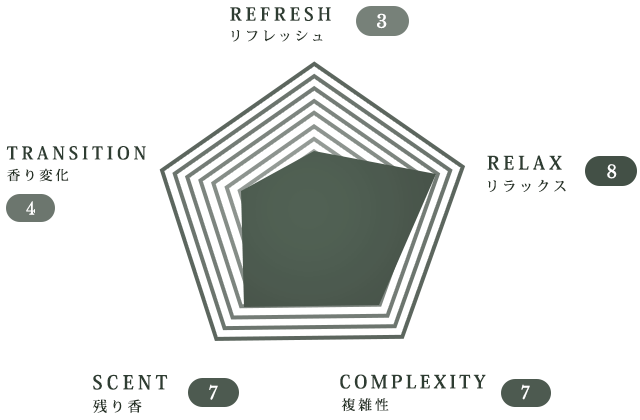
<style>
.page{position:relative;width:640px;height:420px;background:#ffffff}
.page>*{position:absolute;margin:0}
.t1{font:17.9px "KozMinPr6N-Bold";letter-spacing:0.22em;color:#27452e}
.t2{font:17.9px "LibreBaskerville-Regular";letter-spacing:0.06em;color:#ffffff}
.t3{font:13.4px "KozMinPr6N-Medium";letter-spacing:0.22em;color:#253125}
.t4{font:17.5px "KozMinPr6N-Bold";letter-spacing:0.22em;color:#27452e}
.t5{font:18.4px "KozMinPr6N-Bold";letter-spacing:0.22em;color:#27452e}
.t6{font:13.1px "KozMinPr6N-Medium";letter-spacing:0.22em;color:#20381f}
.t7{font:17.7px "LibreBaskerville-Regular";letter-spacing:0.06em;color:#ffffff}
.t8{font:13.8px "KozMinPr6N-Medium";letter-spacing:0.22em;color:#20381f}
.t9{font:16.8px "LibreBaskerville-Regular";letter-spacing:0.06em;color:#ffffff}
.t10{font:18.9px "KozMinPr6N-Bold";letter-spacing:0.22em;color:#27452e}
.t11{font:18.2px "KozMinPr6N-Bold";letter-spacing:0.18em;color:#27452e}
.t12{font:17.4px "LibreBaskerville-Regular";letter-spacing:0.06em;color:#ffffff}
.t13{font:17.1px "LibreBaskerville-Regular";letter-spacing:0.06em;color:#ffffff}
.t14{font:14.2px "KozMinPr6N-Medium";letter-spacing:0.22em;color:#20381f}
.t15{font:13.7px "KozMinPr6N-Medium";letter-spacing:0.22em;color:#253125}
</style>
<div class="page">
<p class="t1" style="left:230px;top:7px;width:101px;height:14px">REFRESH</p>
<p class="t2" style="left:377px;top:13px;width:10px;height:16px">3</p>
<p class="t3" style="left:231px;top:30px;width:92px;height:12px">リフレッシュ</p>
<p class="t4" style="left:6px;top:146px;width:140px;height:14px">TRANSITION</p>
<p class="t5" style="left:487px;top:155px;width:75px;height:15px">RELAX</p>
<p class="t6" style="left:7px;top:168px;width:62px;height:14px">香り変化</p>
<p class="t7" style="left:607px;top:164px;width:10px;height:15px">8</p>
<p class="t8" style="left:488px;top:179px;width:78px;height:13px">リラックス</p>
<p class="t9" style="left:26px;top:201px;width:9px;height:14px">4</p>
<p class="t10" style="left:93px;top:374px;width:75px;height:16px">SCENT</p>
<p class="t11" style="left:340px;top:374px;width:146px;height:15px">COMPLEXITY</p>
<p class="t12" style="left:209px;top:384px;width:9px;height:16px">7</p>
<p class="t13" style="left:521px;top:384px;width:9px;height:16px">7</p>
<p class="t14" style="left:93px;top:399px;width:49px;height:14px">残り香</p>
<p class="t15" style="left:341px;top:398px;width:48px;height:14px">複雑性</p>
</div>
